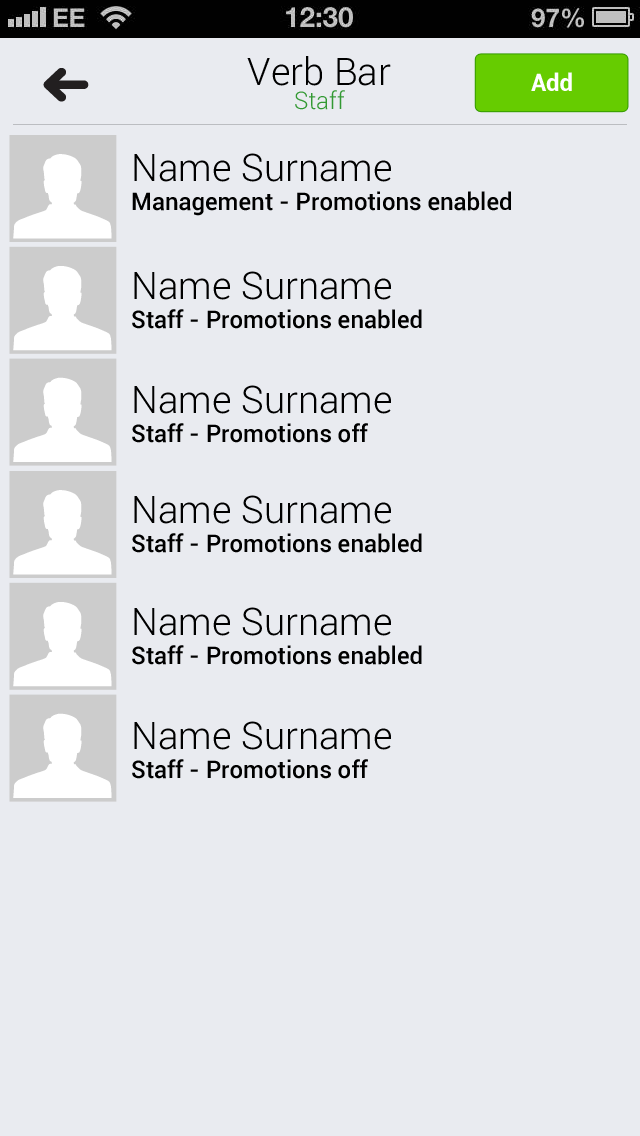
<style>
.page{position:relative;width:640px;height:1136px;background:#e9ebf0}
.page>*{position:absolute;margin:0}
.t1{font:38px "Roboto-Light";color:#000000}
.t2{font:24px "Roboto-Bold";color:#ffffff}
.t3{font:24px "Roboto-Light";color:#339933}
.t4{font:24px "Roboto-Medium";color:#000000}
</style>
<div class="page">
<p class="t1" style="left:247px;top:56px;width:144px;height:30px">Verb Bar</p>
<p class="t2" style="left:531px;top:72px;width:41px;height:19px">Add</p>
<p class="t3" style="left:295px;top:90px;width:50px;height:20px">Staff</p>
<p class="t4" style="left:132px;top:153px;width:379px;height:63px"><span class="t1">Name Surname<br></span>Management - Promotions enabled</p>
<p class="t4" style="left:132px;top:271px;width:290px;height:58px"><span class="t1">Name Surname<br></span>Staff - Promotions enabled</p>
<p class="t4" style="left:132px;top:385px;width:259px;height:58px"><span class="t1">Name Surname<br></span>Staff - Promotions off</p>
<p class="t4" style="left:132px;top:495px;width:290px;height:58px"><span class="t1">Name Surname<br></span>Staff - Promotions enabled</p>
<p class="t4" style="left:132px;top:607px;width:290px;height:58px"><span class="t1">Name Surname<br></span>Staff - Promotions enabled</p>
<p class="t4" style="left:132px;top:721px;width:259px;height:58px"><span class="t1">Name Surname<br></span>Staff - Promotions off</p>
</div>
